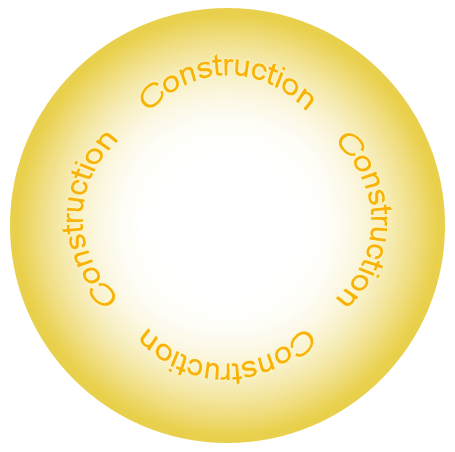
<style>
.page{position:relative;width:455px;height:452px;background:#ffffff}
.page>*{position:absolute;margin:0}
.t1{font:30px "ArialMT";color:#f9b209;scale:0.87 1}
</style>
<div class="page">
<p class="t1" style="left:140px;top:54px;width:174px;height:57px">Construction</p>
<p class="t1" style="left:61px;top:133px;width:57px;height:173px;rotate:-90deg">Construction</p>
<p class="t1" style="left:336px;top:133px;width:57px;height:173px;rotate:90deg">Construction</p>
<p class="t1" style="left:140px;top:328px;width:174px;height:57px;rotate:180deg">Construction</p>
</div>
